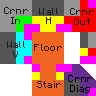
<style>
.page{position:relative;width:96px;height:96px}
.page>*{position:absolute;margin:0}
.t1{font:8px "Minecraftia";letter-spacing:0.05em;color:#1c1c1a}
.t2{font:8px "Minecraftia";letter-spacing:0.05em;color:#000000}
</style>
<div class="page">
<p class="t1" style="left:4px;top:7px;width:24px;height:17px;text-align:center">Crnr<br>In</p>
<p class="t1" style="left:39px;top:8px;width:19px;height:16px;text-align:center">Wall<br>H</p>
<p class="t1" style="left:70px;top:8px;width:24px;height:17px;text-align:center">Crnr<br>Out</p>
<p class="t1" style="left:7px;top:41px;width:18px;height:17px;text-align:center">Wall<br>V</p>
<p class="t1" style="left:34px;top:44px;width:28px;height:7px">Floor</p>
<p class="t2" style="left:68px;top:75px;width:24px;height:18px;text-align:center">Crnr<br>Diag</p>
<p class="t1" style="left:37px;top:81px;width:24px;height:7px">Stair</p>
</div>
